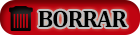
<style>
.page{position:relative;width:140px;height:35px}
.page>*{position:absolute;margin:0}
.t1{font:24px "Cambria-Bold";letter-spacing:-0.05em;color:#010101}
</style>
<div class="page">
<p class="t1" style="left:38px;top:10px;width:89px;height:18px">BORRAR</p>
</div>
